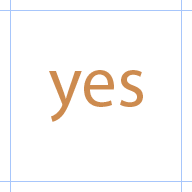
<style>
.page{position:relative;width:192px;height:192px;background:#ffffff}
.page>*{position:absolute;margin:0}
.t1{font:72px "MyriadPro-Regular";color:#cd8b4f}
</style>
<div class="page">
<p class="t1" style="left:49px;top:70px;width:94px;height:52px">yes</p>
</div>
